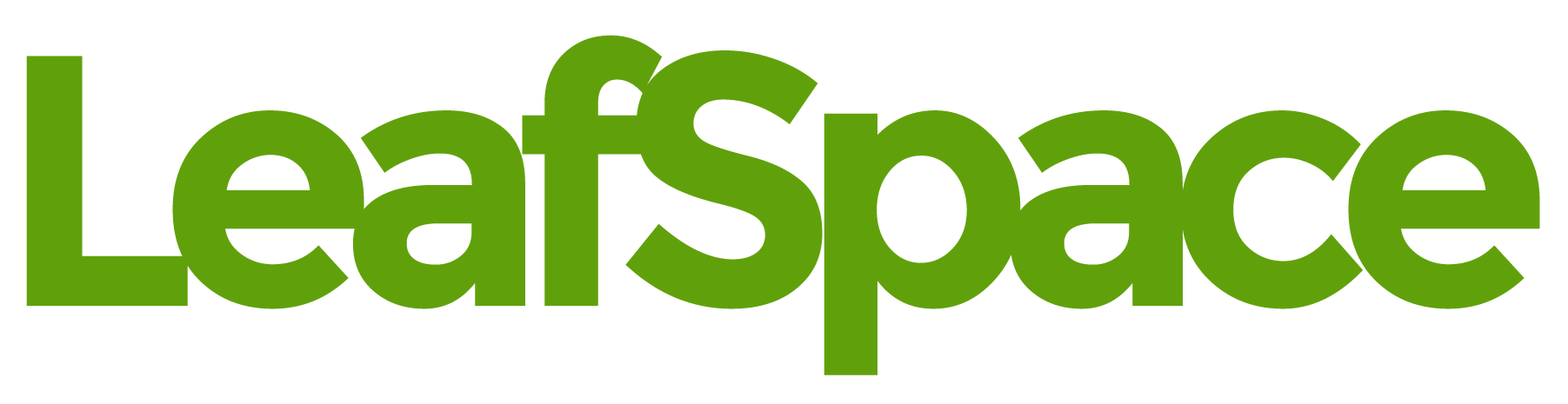
<style>
.page{position:relative;width:1568px;height:404px;background:#ffffff}
.page>*{position:absolute;margin:0}
.t1{font:357.3px "Montserrat-Bold";letter-spacing:-0.11em;color:#60a10b}
</style>
<div class="page">
<p class="t1" style="left:26px;top:35px;width:1514px;height:341px">LeafSpace</p>
</div>
